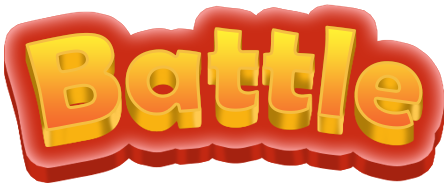
<style>
.page{position:relative;width:448px;height:183px;background:#ffffff}
.page>*{position:absolute;margin:0}
.t1{font:131.6px "BerlinSansFBDemi-Bold"}
</style>
<div class="page">
<p class="t1" style="left:25px;top:25px;width:398px;height:107px">Battle</p>
</div>
